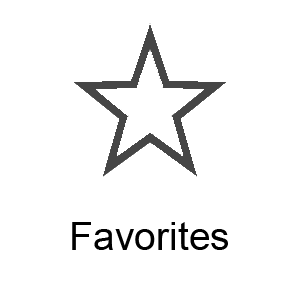
<style>
.page{position:relative;width:300px;height:300px;background:#ffffff}
.page>*{position:absolute;margin:0}
.t1{font:39.1px "ArialMT";color:#000000}
</style>
<div class="page">
<p class="t1" style="left:72px;top:222px;width:156px;height:28px">Favorites</p>
</div>
